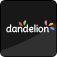
<style>
.page{position:relative;width:57px;height:57px;background:#181818}
.page>*{position:absolute;margin:0}
.t1{font:9.7px "Delius-Regular";color:#ffffff}
</style>
<div class="page">
<p class="t1" style="left:6px;top:24px;width:43px;height:9px">dandelion</p>
</div>
